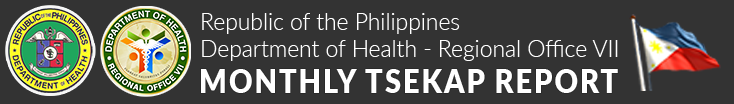
<style>
.page{position:relative;width:734px;height:104px;background:#333333}
.page>*{position:absolute;margin:0}
.t1{font:22.9px "Lato-Light";color:#ffffff}
.t2{font:32px "Lato-Black";letter-spacing:0.07em;color:#ffffff;scale:0.9 1}
</style>
<div class="page">
<p class="t1" style="left:202px;top:13px;width:416px;height:48px">Republic of the Philippines<br>Department of Health - Regional Office VII</p>
<p class="t2" style="left:201px;top:69px;width:417px;height:24px">MONTHLY TSEKAP REPORT</p>
</div>
